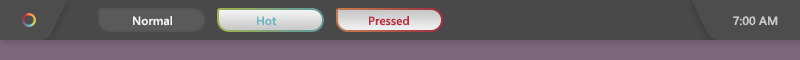
<style>
.page{position:relative;width:800px;height:60px;background:#494949}
.page>*{position:absolute;margin:0}
.t1{font:12px "SegoeUI-Semibold";color:#f2f2f2}
.t2{font:12px "SegoeUI-Semibold";color:#6ab7c2}
.t3{font:12px "SegoeUI-Semibold";color:#bb2b3d}
.t4{font:12px "SegoeUI-Semibold";color:#c8c8c8}
</style>
<div class="page">
<p class="t1" style="left:133px;top:16px;width:39px;height:10px">Normal</p>
<p class="t2" style="left:257px;top:16px;width:20px;height:10px">Hot</p>
<p class="t3" style="left:369px;top:16px;width:40px;height:10px">Pressed</p>
<p class="t4" style="left:733px;top:16px;width:45px;height:10px">7:00 AM</p>
</div>
